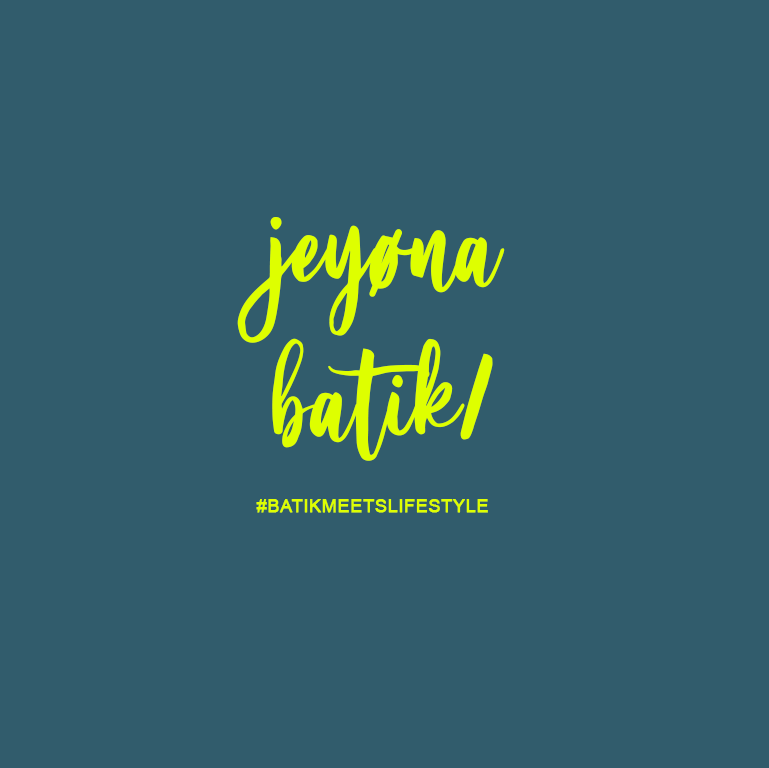
<style>
.page{position:relative;width:769px;height:768px;background:#315c6c}
.page>*{position:absolute;margin:0}
.t1{font:129.6px "Serenity";color:#deff00}
.t2{font:18.3px "ArialMT";color:#deff00;font-weight:bold}
</style>
<div class="page">
<p class="t1" style="left:237px;top:217px;width:268px;height:244px;text-align:center">jeyøna<br>batik/</p>
<p class="t2" style="left:256px;top:499px;width:232px;height:14px">#BATIKMEETSLIFESTYLE</p>
</div>
